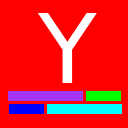
<style>
.page{position:relative;width:128px;height:128px;background:#ff0000}
.page>*{position:absolute;margin:0}
.t1{font:96px "DejaVuSans";color:#ffffff}
</style>
<div class="page">
<p class="t1" style="left:37px;top:13px;width:60px;height:70px">Y</p>
</div>
